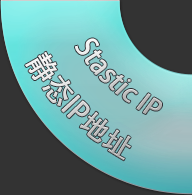
<style>
.page{position:relative;width:192px;height:195px;background:#333333}
.page>*{position:absolute;margin:0}
.t1{font:26.6px "AdobeHeitiStd-Regular";scale:0.91 1}
.t2{font:28.9px "AdobeHeitiStd-Regular";scale:0.91 1}
</style>
<div class="page">
<p class="t1" style="left:75px;top:38px;width:87px;height:76px;rotate:42deg">Stastic IP</p>
<p class="t2" style="left:25px;top:51px;width:106px;height:110px;rotate:45deg">静态IP地址</p>
</div>
